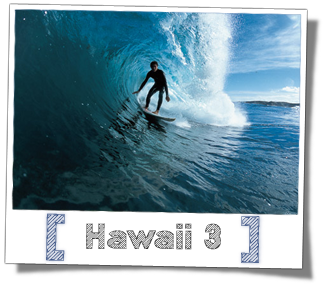
<style>
.page{position:relative;width:327px;height:286px;background:#ffffff}
.page>*{position:absolute;margin:0}
.t1{font:60px "MalabarsTryout";color:#2a4379}
.t2{font:36px "MalabarsTryout";letter-spacing:-0.05em;color:#373737}
</style>
<div class="page">
<p class="t1" style="left:46px;top:213px;width:214px;height:50px;rotate:1deg">[          ]</p>
<p class="t2" style="left:86px;top:223px;width:135px;height:27px">Hawaii 3</p>
</div>
